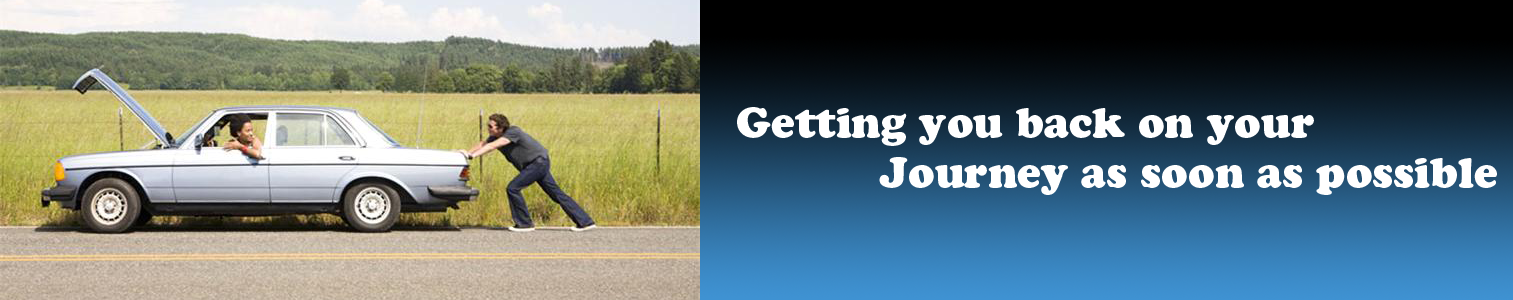
<style>
.page{position:relative;width:1513px;height:300px}
.page>*{position:absolute;margin:0}
.t1{font:41.9px "CooperBlackStd";color:#ffffff}
</style>
<div class="page">
<p class="t1" style="left:737px;top:107px;width:760px;height:88px">Getting you back on your <br>    Journey as soon as possible</p>
</div>
